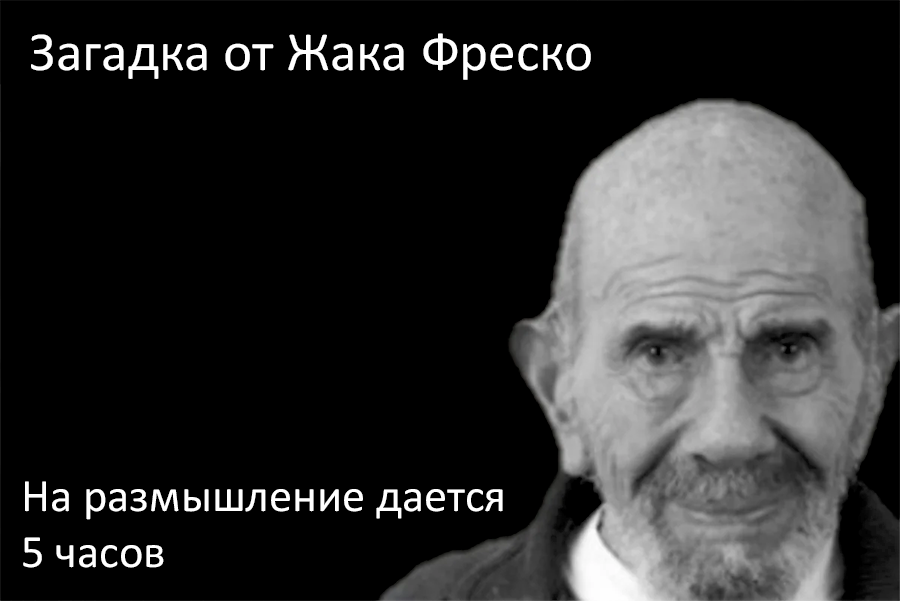
<style>
.page{position:relative;width:900px;height:601px;background:#000000}
.page>*{position:absolute;margin:0}
.t1{font:55.5px "Calibri";color:#ffffff}
.t2{font:46.5px/56.3px "Calibri";color:#ffffff}
</style>
<div class="page">
<p class="t1" style="left:31px;top:33px;width:560px;height:47px">Загадка от Жака Фреско</p>
<p class="t2" style="left:23px;top:481px;width:480px;height:87px">На размышление дается<br>5 часов</p>
</div>
